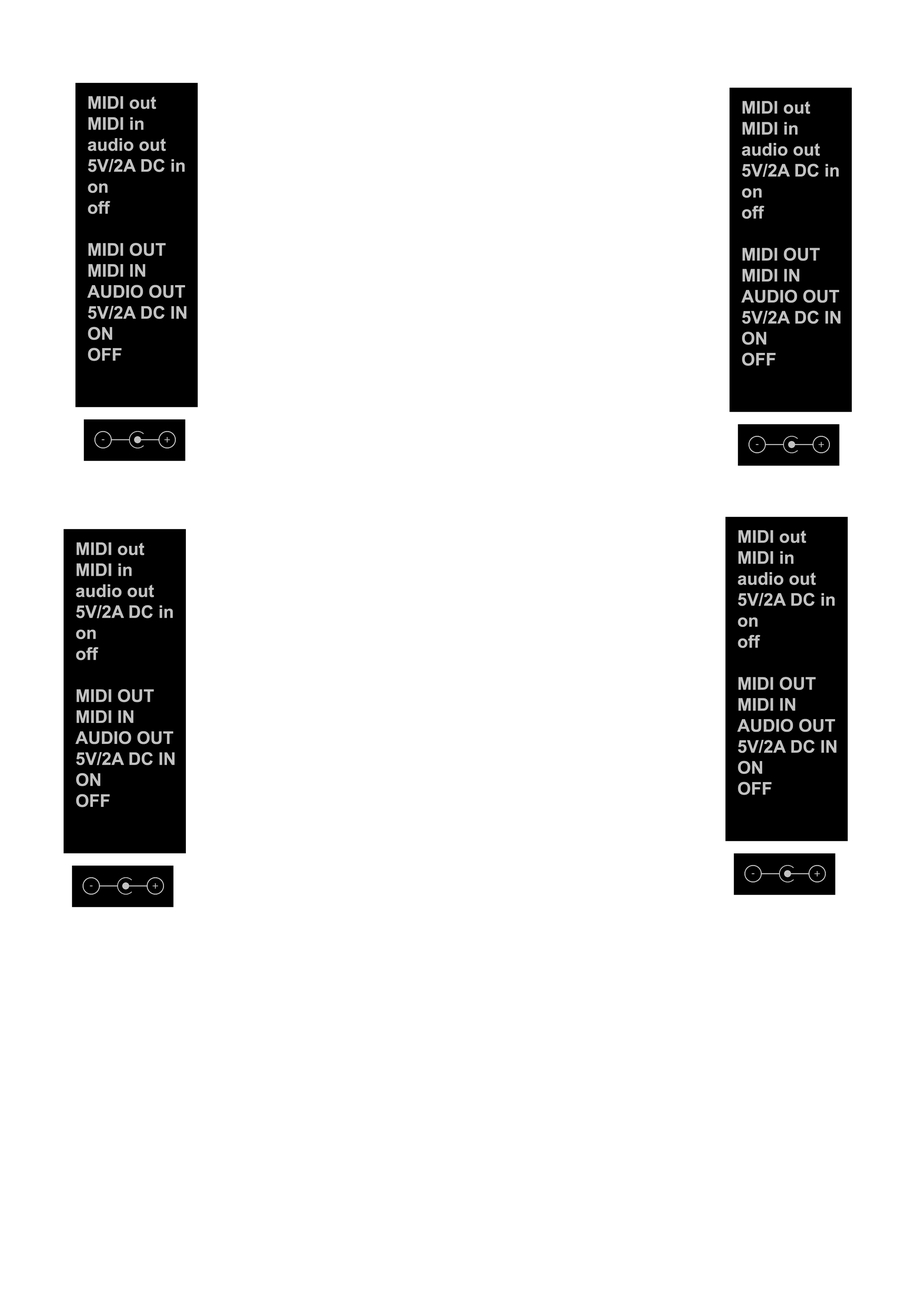
<style>
.page{position:relative;width:918px;height:1299px;background:#ffffff}
.page>*{position:absolute;margin:0}
.t1{font:17.5px "Arial-BoldMT";color:#c1c1c1}
</style>
<div class="page">
<p class="t1" style="left:87px;top:96px;width:100px;height:265px">MIDI out<br>MIDI in<br>audio out<br>5V/2A DC in<br>on<br>off<br><br>MIDI OUT<br>MIDI IN<br>AUDIO OUT<br>5V/2A DC IN<br>ON<br>OFF</p>
<p class="t1" style="left:741px;top:101px;width:100px;height:265px">MIDI out<br>MIDI in<br>audio out<br>5V/2A DC in<br>on<br>off<br><br>MIDI OUT<br>MIDI IN<br>AUDIO OUT<br>5V/2A DC IN<br>ON<br>OFF</p>
<p class="t1" style="left:737px;top:530px;width:100px;height:265px">MIDI out<br>MIDI in<br>audio out<br>5V/2A DC in<br>on<br>off<br><br>MIDI OUT<br>MIDI IN<br>AUDIO OUT<br>5V/2A DC IN<br>ON<br>OFF</p>
<p class="t1" style="left:75px;top:542px;width:100px;height:265px">MIDI out<br>MIDI in<br>audio out<br>5V/2A DC in<br>on<br>off<br><br>MIDI OUT<br>MIDI IN<br>AUDIO OUT<br>5V/2A DC IN<br>ON<br>OFF</p>
</div>
